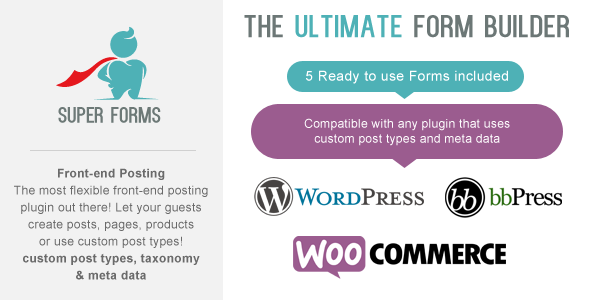
<style>
.page{position:relative;width:590px;height:300px;background:#ffffff}
.page>*{position:absolute;margin:0}
.t1{font:31.7px "Kenzo";letter-spacing:0.025em;color:#6c7776}
.t2{font:31.7px "Kenzo";letter-spacing:0.025em;color:#4eb1b6}
.t3{font:14px "ArialMT";letter-spacing:0.025em;color:#ffffff}
.t4{font:12px/15.1px "ArialMT";letter-spacing:0.025em;color:#ffffff}
.t5{font:12px/17px "ArialMT";letter-spacing:0.025em;color:#6a6a6a}
.t6{font:12px/17px "Arial-BoldMT";letter-spacing:0.025em;color:#6a6a6a}
</style>
<div class="page">
<p class="t1" style="left:244px;top:15px;width:325px;height:23px">The <span class="t2">ultimate</span> form builder</p>
<p class="t3" style="left:306px;top:70px;width:202px;height:14px">5 Ready to use Forms included</p>
<p class="t4" style="left:304px;top:118px;width:206px;height:28px;text-align:center">Compatible with any plugin that uses<br>custom post types and meta data</p>
<p class="t5" style="left:14px;top:168px;width:194px;height:112px;text-align:center"><span class="t6">Front-end Posting<br></span>The most flexible front-end posting<br>plugin out there! Let your guests<br>create posts, pages, products<br>or use custom post types!<br><span class="t6">custom post types, taxonomy<br>&amp; meta data</span></p>
</div>
